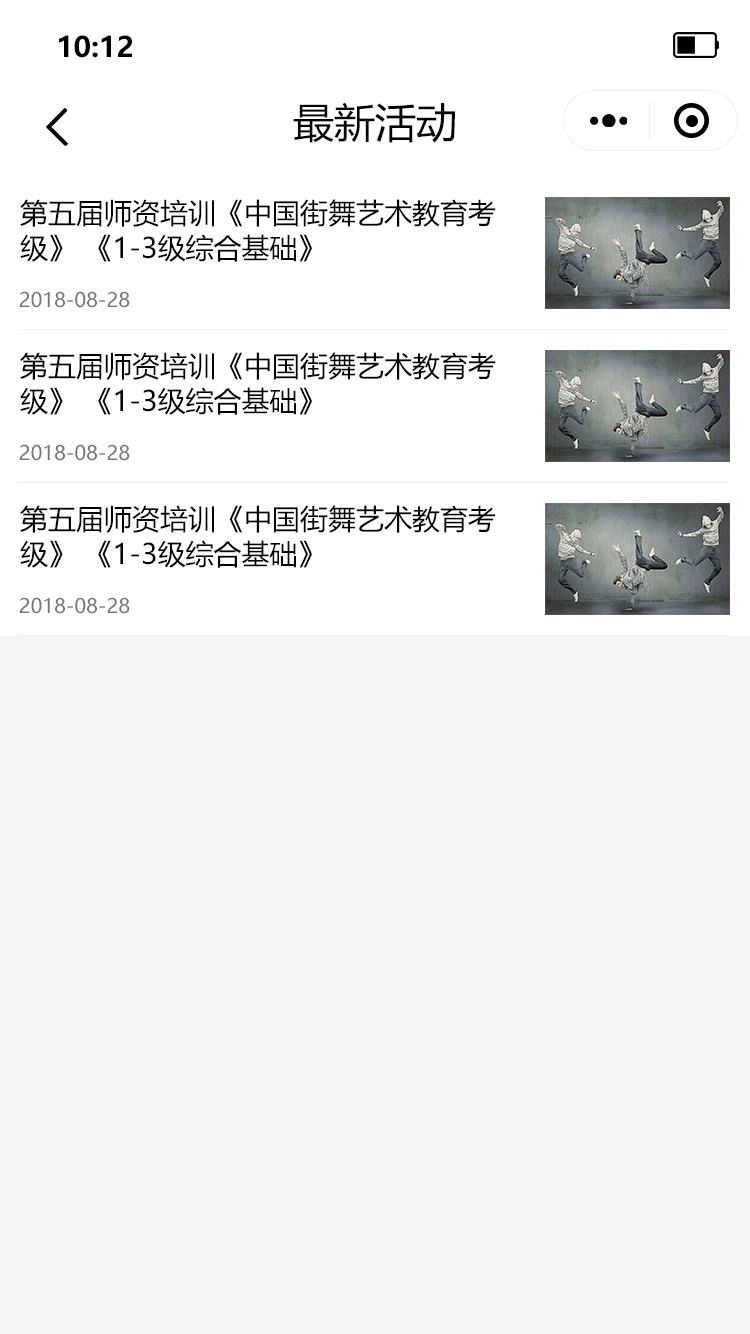
<style>
.page{position:relative;width:750px;height:1334px;background:#f5f5f5}
.page>*{position:absolute;margin:0}
.t1{font:28.1px "MicrosoftYaHei-Bold";color:#000000}
.t2{font:41px "MicrosoftYaHei";color:#000000}
.t3{font:28px/35px "MicrosoftYaHei";color:#000000}
.t4{font:20px "MicrosoftYaHei";color:#777777}
</style>
<div class="page">
<p class="t1" style="left:59px;top:35px;width:73px;height:23px">10:12</p>
<p class="t2" style="left:293px;top:102px;width:162px;height:41px">最新活动</p>
<p class="t3" style="left:20px;top:199px;width:476px;height:63px">第五届师资培训《中国街舞艺术教育考<br>级》 《1-3级综合基础》</p>
<p class="t4" style="left:20px;top:291px;width:110px;height:17px">2018-08-28</p>
<p class="t3" style="left:20px;top:352px;width:476px;height:63px">第五届师资培训《中国街舞艺术教育考<br>级》 《1-3级综合基础》</p>
<p class="t4" style="left:20px;top:444px;width:110px;height:17px">2018-08-28</p>
<p class="t3" style="left:20px;top:505px;width:476px;height:63px">第五届师资培训《中国街舞艺术教育考<br>级》 《1-3级综合基础》</p>
<p class="t4" style="left:20px;top:597px;width:110px;height:17px">2018-08-28</p>
</div>
